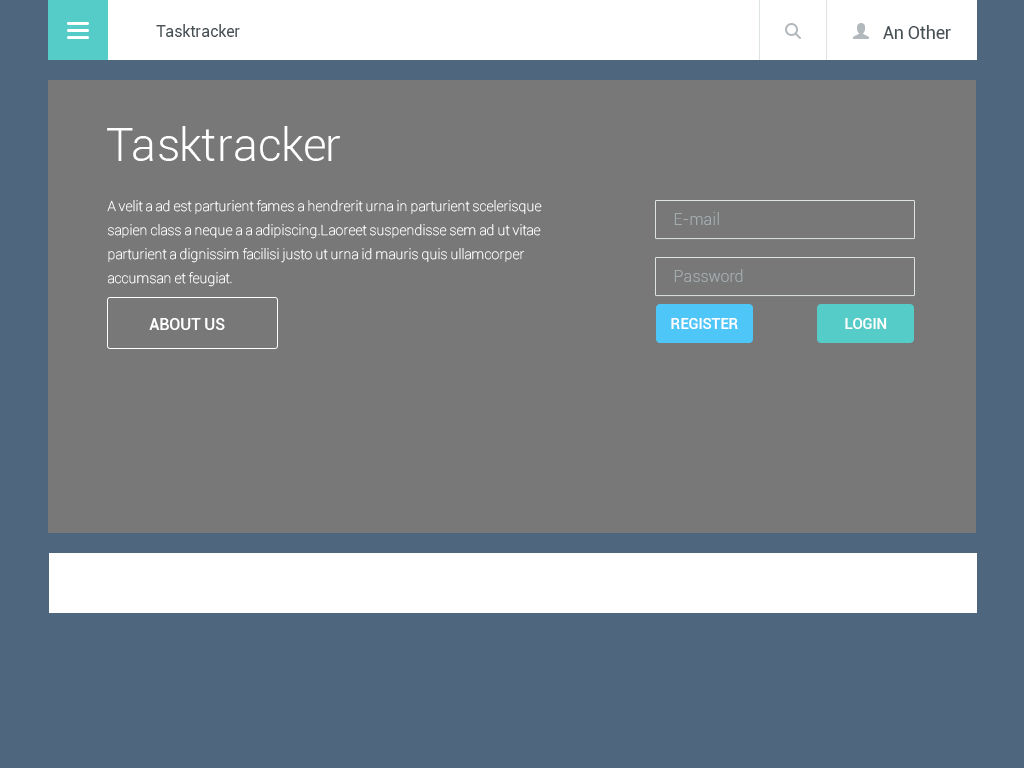
<style>
.page{position:relative;width:1024px;height:768px;background:#787878}
.page>*{position:absolute;margin:0}
.t1{font:16px "Roboto-Regular";color:#475055}
.t2{font:18px "Roboto-Regular";color:#475055}
.t3{font:46px "Roboto-Light";color:#ffffff}
.t4{font:14px/24px "Roboto-Thin";color:#ffffff}
.t5{font:16px "Roboto-Light";color:#a3abaf}
.t6{font:16px "Roboto-Medium";color:#ffffff}
.t7{font:15px "Roboto-Medium";color:#ffffff}
</style>
<div class="page">
<p class="t1" style="left:156px;top:24px;width:84px;height:13px">Tasktracker</p>
<p class="t2" style="left:883px;top:25px;width:68px;height:14px">An Other</p>
<p class="t3" style="left:107px;top:126px;width:233px;height:35px">Tasktracker</p>
<p class="t4" style="left:107px;top:200px;width:435px;height:87px">A velit a ad est parturient fames a hendrerit urna in parturient scelerisque sapien class a neque a a adipiscing.Laoreet suspendisse sem ad ut vitae parturient a dignissim facilisi justo ut urna id mauris quis ullamcorper accumsan et feugiat.</p>
<p class="t5" style="left:674px;top:212px;width:45px;height:13px">E-mail</p>
<p class="t5" style="left:674px;top:269px;width:69px;height:13px">Password</p>
<p class="t6" style="left:149px;top:318px;width:76px;height:12px">ABOUT US</p>
<p class="t7" style="left:671px;top:318px;width:67px;height:11px">REGISTER</p>
<p class="t7" style="left:845px;top:318px;width:42px;height:11px">LOGIN</p>
</div>
